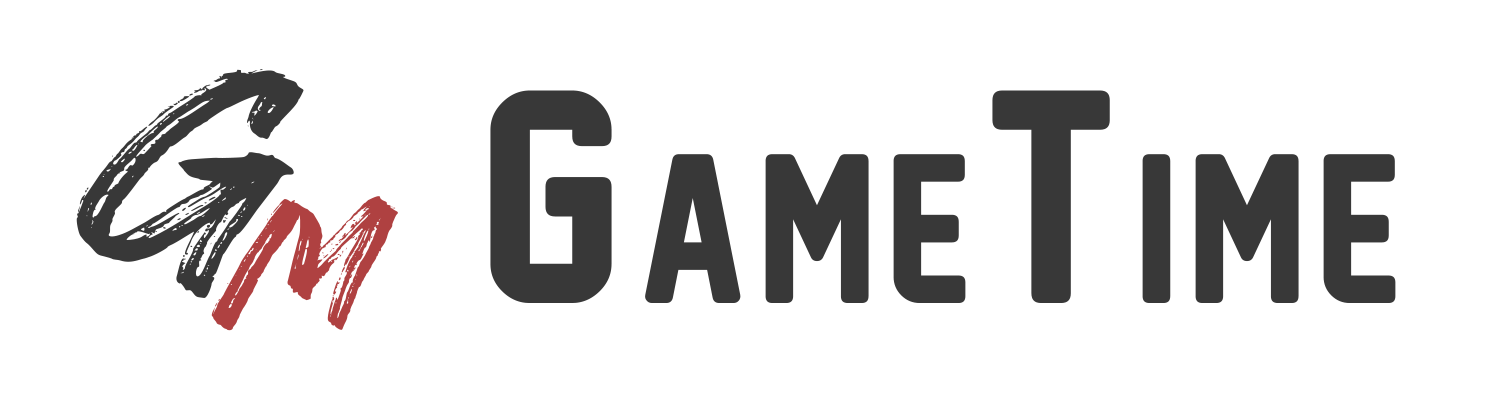
<style>
.page{position:relative;width:1500px;height:400px;background:#ffffff}
.page>*{position:absolute;margin:0}
.t1{font:265.7px "RawkBrush";letter-spacing:0.06em;color:#383838;font-variant:small-caps;scale:1.79 1}
.t2{font:277.4px "NewAthleticM54";letter-spacing:0.06em;color:#383838;font-variant:small-caps}
.t3{font:173.4px "RawkBrush";letter-spacing:0.06em;color:#af4141;font-variant:small-caps;scale:1.63 1}
</style>
<div class="page">
<p class="t1" style="left:76px;top:69px;width:228px;height:229px">G</p>
<p class="t2" style="left:490px;top:90px;width:906px;height:213px">GameTime</p>
<p class="t3" style="left:211px;top:196px;width:187px;height:135px">M</p>
</div>
